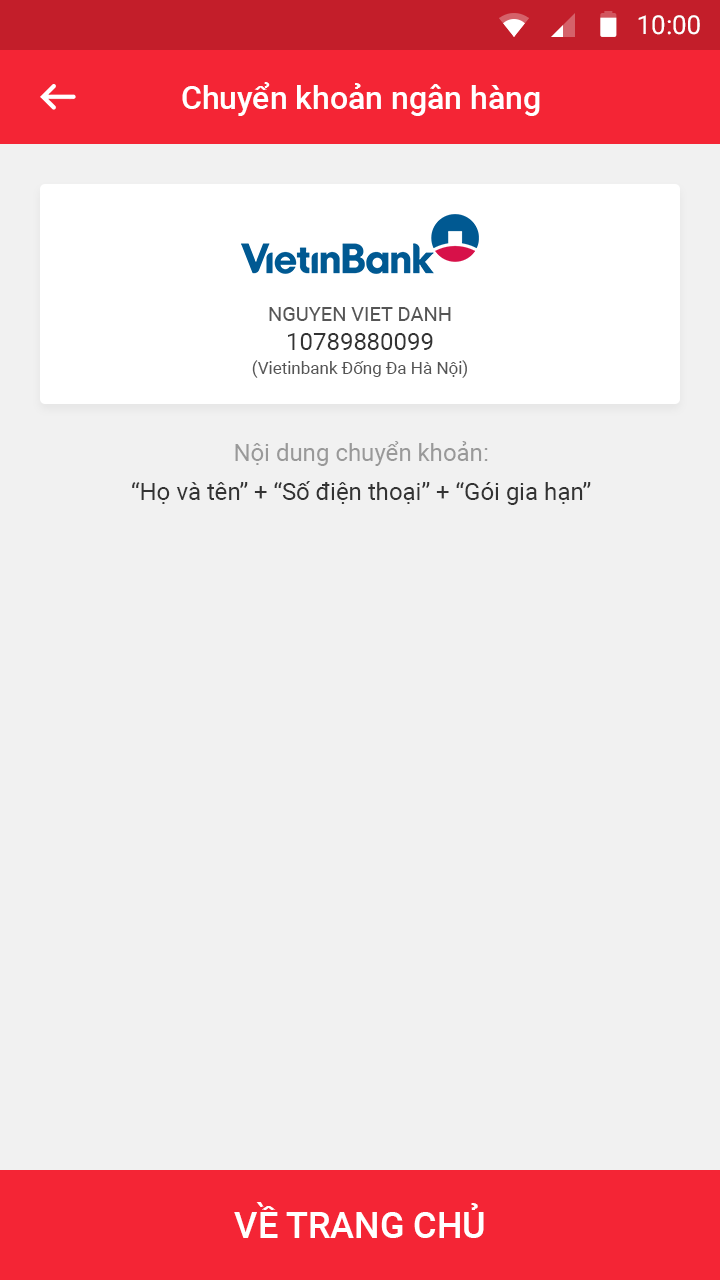
<style>
.page{position:relative;width:720px;height:1280px;background:#f1f1f1}
.page>*{position:absolute;margin:0}
.t1{font:26px "Roboto-Regular";color:#ffffff}
.t2{font:32px "Roboto-Medium";color:#ffffff}
.t3{font:17px/24px "Roboto-Regular";color:#555555}
.t4{font:20px/27px "Roboto-Regular";color:#555555;text-transform:uppercase}
.t5{font:24px/29px "Roboto-Regular";color:#333333;text-transform:uppercase}
.t6{font:24px/39px "Roboto-Regular";color:#333333}
.t7{font:24px/39px "Roboto-Regular";color:#999999}
.t8{font:36px "Roboto-Medium";color:#ffffff;text-transform:uppercase}
</style>
<div class="page">
<p class="t1" style="left:638px;top:15px;width:62px;height:20px">10:00</p>
<p class="t2" style="left:182px;top:82px;width:358px;height:34px">Chuyển khoản ngân hàng</p>
<p class="t3" style="left:252px;top:307px;width:215px;height:71px;text-align:center"><span class="t4">nguyen viet danh<br></span><span class="t5">10789880099<br></span>(Vietinbank Đống Đa Hà Nội)</p>
<p class="t6" style="left:132px;top:441px;width:459px;height:64px;text-align:center"><span class="t7">Nội dung chuyển khoản:<br></span>“Họ và tên” + “Số điện thoại” + “Gói gia hạn”</p>
<p class="t8" style="left:234px;top:1202px;width:250px;height:36px">về trang chủ</p>
</div>
